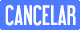
<style>
.page{position:relative;width:80px;height:30px;background:#4d7aff}
.page>*{position:absolute;margin:0}
.t1{font:25px "LibelSuit-Regular";letter-spacing:0.01em;color:#ffffff}
</style>
<div class="page">
<p class="t1" style="left:5px;top:5px;width:71px;height:21px">CANCELAR</p>
</div>
